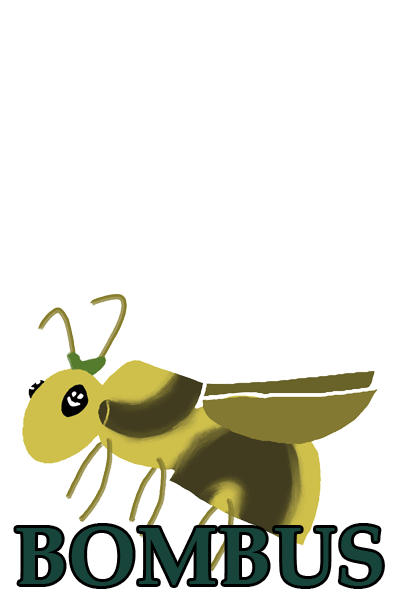
<style>
.page{position:relative;width:400px;height:596px;background:#ffffff}
.page>*{position:absolute;margin:0}
.t1{font:82px "PalatinoLinotype-Bold";color:#18453b}
</style>
<div class="page">
<p class="t1" style="left:16px;top:526px;width:366px;height:60px">BOMBUS</p>
</div>
